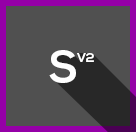
<style>
.page{position:relative;width:136px;height:132px;background:#505050}
.page>*{position:absolute;margin:0}
.t1{font:44.5px "NexaBold";color:#ffffff}
.t2{font:12.2px "NexaBold";color:#ffffff}
</style>
<div class="page">
<p class="t1" style="left:49px;top:50px;width:27px;height:33px">S</p>
<p class="t2" style="left:77px;top:53px;width:17px;height:9px">V2</p>
</div>
